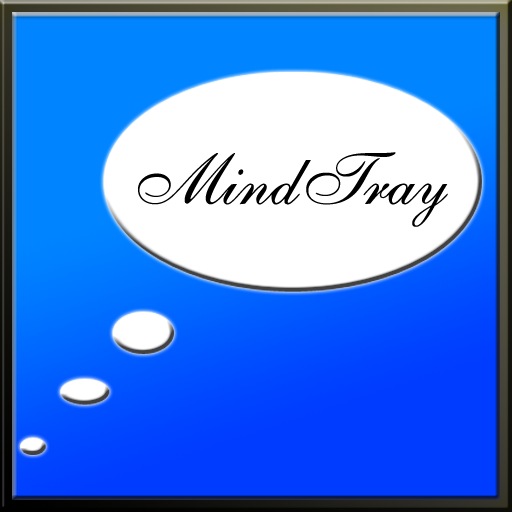
<style>
.page{position:relative;width:512px;height:512px;background:#ffffff}
.page>*{position:absolute;margin:0}
.t1{font:72px "English111VivaceBT-Regular";color:#000000}
</style>
<div class="page">
<p class="t1" style="left:138px;top:152px;width:310px;height:75px">MindTray</p>
</div>
